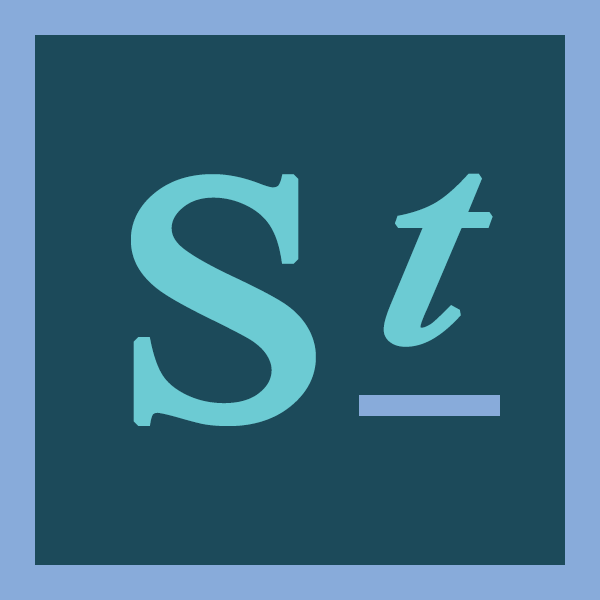
<style>
.page{position:relative;width:600px;height:600px;background:#1c4a5a}
.page>*{position:absolute;margin:0}
.t1{font:349.8px "TimesNewRomanPSMT";color:#6ccbd3;font-weight:bold;scale:1.14 1}
.t2{font:289.2px "TimesNewRomanPS-ItalicMT";color:#6ccbd3;font-weight:bold;scale:1.37 1}
</style>
<div class="page">
<p class="t1" style="left:131px;top:174px;width:185px;height:252px">S</p>
<p class="t2" style="left:383px;top:173px;width:110px;height:174px">t</p>
</div>
